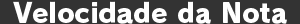
<style>
.page{position:relative;width:300px;height:24px;background:#333333}
.page>*{position:absolute;margin:0}
.t1{font:26.7px "RodinPro-EB";color:#ffffff}
</style>
<div class="page">
<p class="t1" style="left:13px;top:1px;width:274px;height:23px">Velocidade da Nota</p>
</div>
